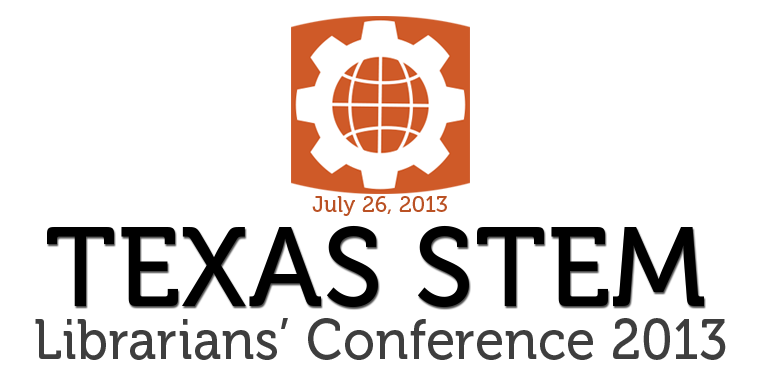
<style>
.page{position:relative;width:760px;height:380px;background:#ffffff}
.page>*{position:absolute;margin:0}
.t1{font:22.1px "Museo-500";letter-spacing:0.01em;color:#cf5a28}
.t2{font:111.3px "Museo-500";letter-spacing:0.01em;color:#000000}
.t3{font:56.1px "Museo-500";letter-spacing:0.01em;color:#3e3e3e;scale:0.93 1}
</style>
<div class="page">
<p class="t1" style="left:312px;top:196px;width:135px;height:20px">July 26, 2013</p>
<p class="t2" style="left:47px;top:225px;width:657px;height:83px">TEXAS STEM</p>
<p class="t3" style="left:35px;top:318px;width:691px;height:42px">Librarians’ Conference 2013</p>
</div>
